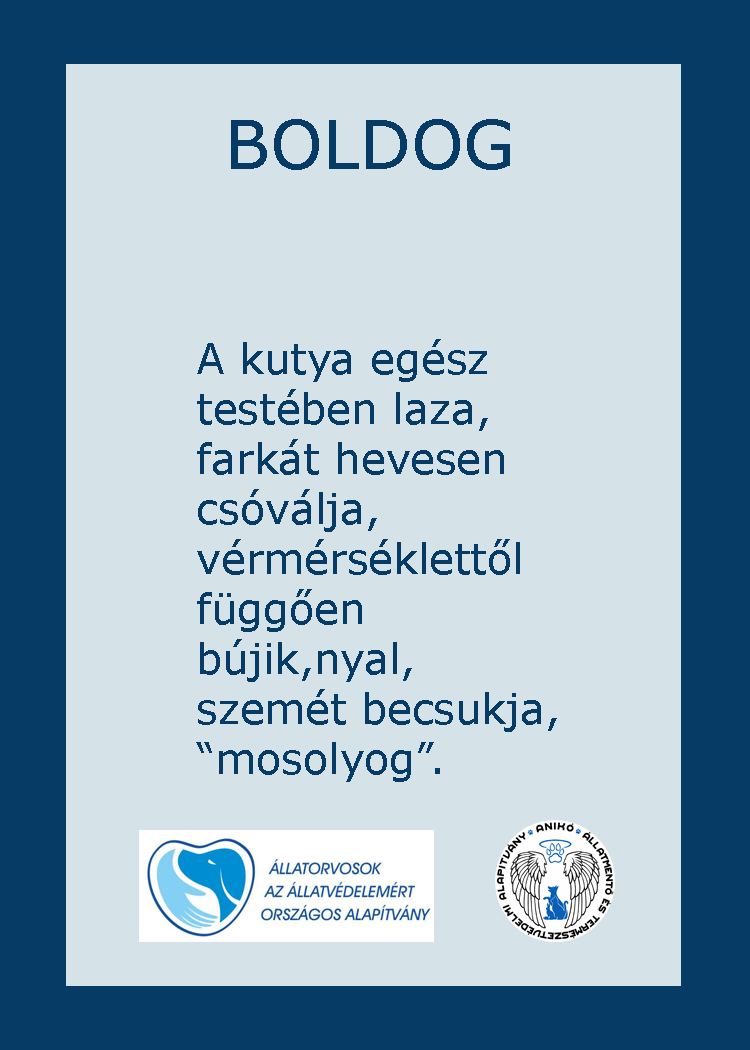
<style>
.page{position:relative;width:750px;height:1050px;background:#d5e2e7}
.page>*{position:absolute;margin:0}
.t1{font:66.7px "Verdana";color:#053b65}
.t2{font:66.7px "GravitateBRK";color:#053b65}
.t3{font:41.7px "Verdana";color:#053b65}
</style>
<div class="page">
<p class="t1" style="left:231px;top:119px;width:279px;height:51px"><span class="t2">         </span>BOLDOG</p>
<p class="t3" style="left:196px;top:339px;width:361px;height:443px">A kutya egész <br>testében laza,<br>farkát hevesen <br>csóválja,<br>vérmérséklettől <br>függően <br>bújik,nyal,<br>szemét becsukja,<br>“mosolyog”.</p>
</div>
